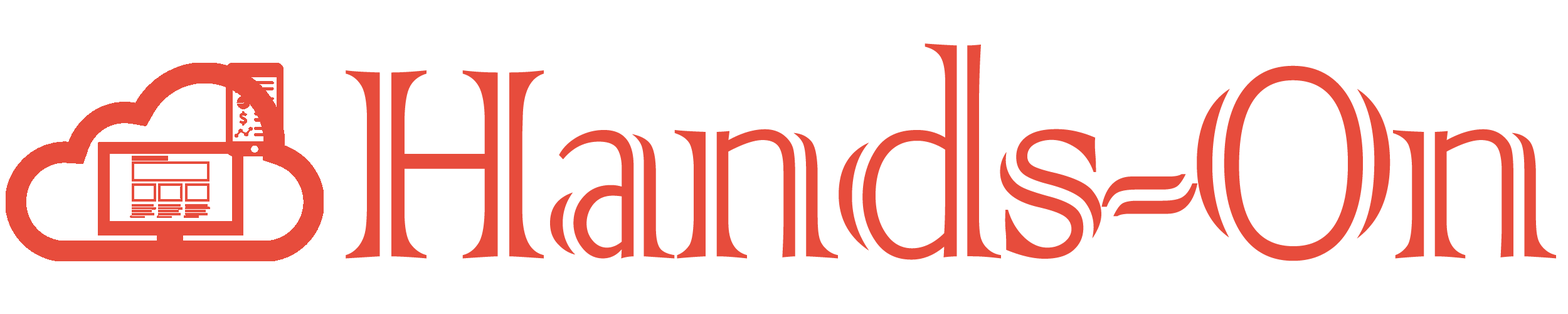
<style>
.page{position:relative;width:1568px;height:314px;background:#ffffff}
.page>*{position:absolute;margin:0}
.t1{font:356.5px "ColonnaMT";letter-spacing:-0.04em;color:#e74c3c;scale:0.91 1}
</style>
<div class="page">
<p class="t1" style="left:346px;top:43px;width:1210px;height:218px">Hands-On</p>
</div>
